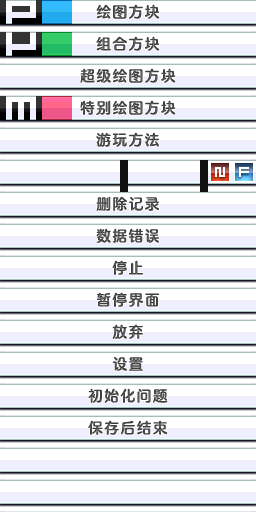
<style>
.page{position:relative;width:256px;height:512px;background:#ffffff}
.page>*{position:absolute;margin:0}
.t1{font:14.7px "FZFW-QingYinTiS-B--GB1-0";letter-spacing:0.1em;color:#3d3e3d}
.t2{font:14.7px "FZFW-QingYinTiS-B--GB1-0";letter-spacing:0.1em}
.t3{font:14.7px "FZFW-QingYinTiS-B--GB1-0";letter-spacing:0.1em;color:#414241}
.t4{font:14.7px "FZFW-QingYinTiS-B--GB1-0";letter-spacing:0.1em;color:#444644}
</style>
<div class="page">
<p class="t1" style="left:96px;top:4px;width:64px;height:15px">绘图方块</p>
<p class="t2" style="left:96px;top:36px;width:64px;height:15px">组合方块</p>
<p class="t1" style="left:80px;top:68px;width:96px;height:15px">超级绘图方块</p>
<p class="t1" style="left:80px;top:100px;width:96px;height:15px">特别绘图方块</p>
<p class="t1" style="left:96px;top:132px;width:63px;height:15px">游玩方法</p>
<p class="t3" style="left:96px;top:196px;width:63px;height:15px">删除记录</p>
<p class="t4" style="left:96px;top:228px;width:63px;height:15px">数据错误</p>
<p class="t1" style="left:112px;top:260px;width:31px;height:15px">停止</p>
<p class="t1" style="left:96px;top:292px;width:63px;height:15px">暂停界面</p>
<p class="t1" style="left:112px;top:324px;width:31px;height:15px">放弃</p>
<p class="t1" style="left:112px;top:357px;width:31px;height:14px">设置</p>
<p class="t1" style="left:88px;top:388px;width:80px;height:15px">初始化问题</p>
<p class="t1" style="left:88px;top:420px;width:80px;height:15px">保存后结束</p>
</div>
